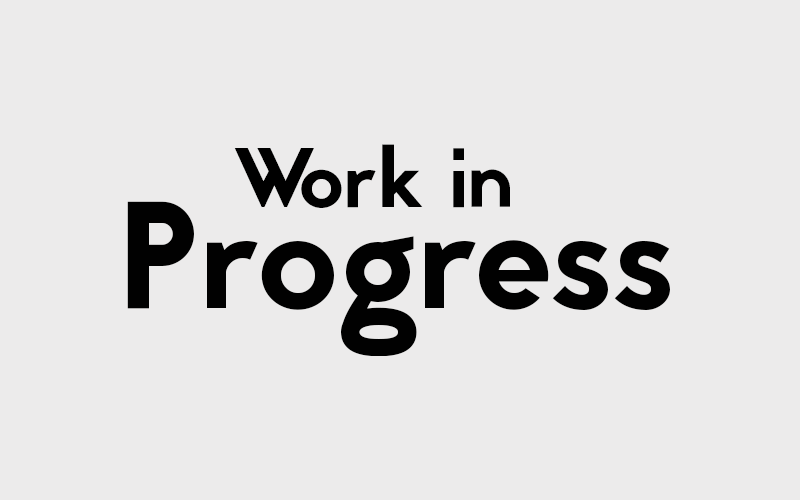
<style>
.page{position:relative;width:800px;height:500px;background:#ecebeb}
.page>*{position:absolute;margin:0}
.t1{font:151.4px/100.9px "Jaapokki-Regular";color:#010101}
.t2{font:84.1px/100.9px "Jaapokki-Regular";color:#010101}
.t3{font:84.1px "Jaapokki-Regular";color:#000000}
</style>
<div class="page">
<p class="t1" style="left:127px;top:144px;width:543px;height:212px;text-align:center"><span class="t2">  ork in <br></span>Progress</p>
<p class="t3" style="left:234px;top:148px;width:80px;height:59px">W</p>
</div>
